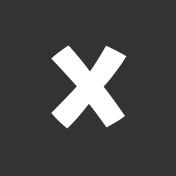
<style>
.page{position:relative;width:176px;height:176px;background:#333333}
.page>*{position:absolute;margin:0}
.t1{font:138px "GrandstanderRoman-ExtraBold";color:#ffffff;font-weight:bold}
</style>
<div class="page">
<p class="t1" style="left:51px;top:45px;width:76px;height:84px">x</p>
</div>
